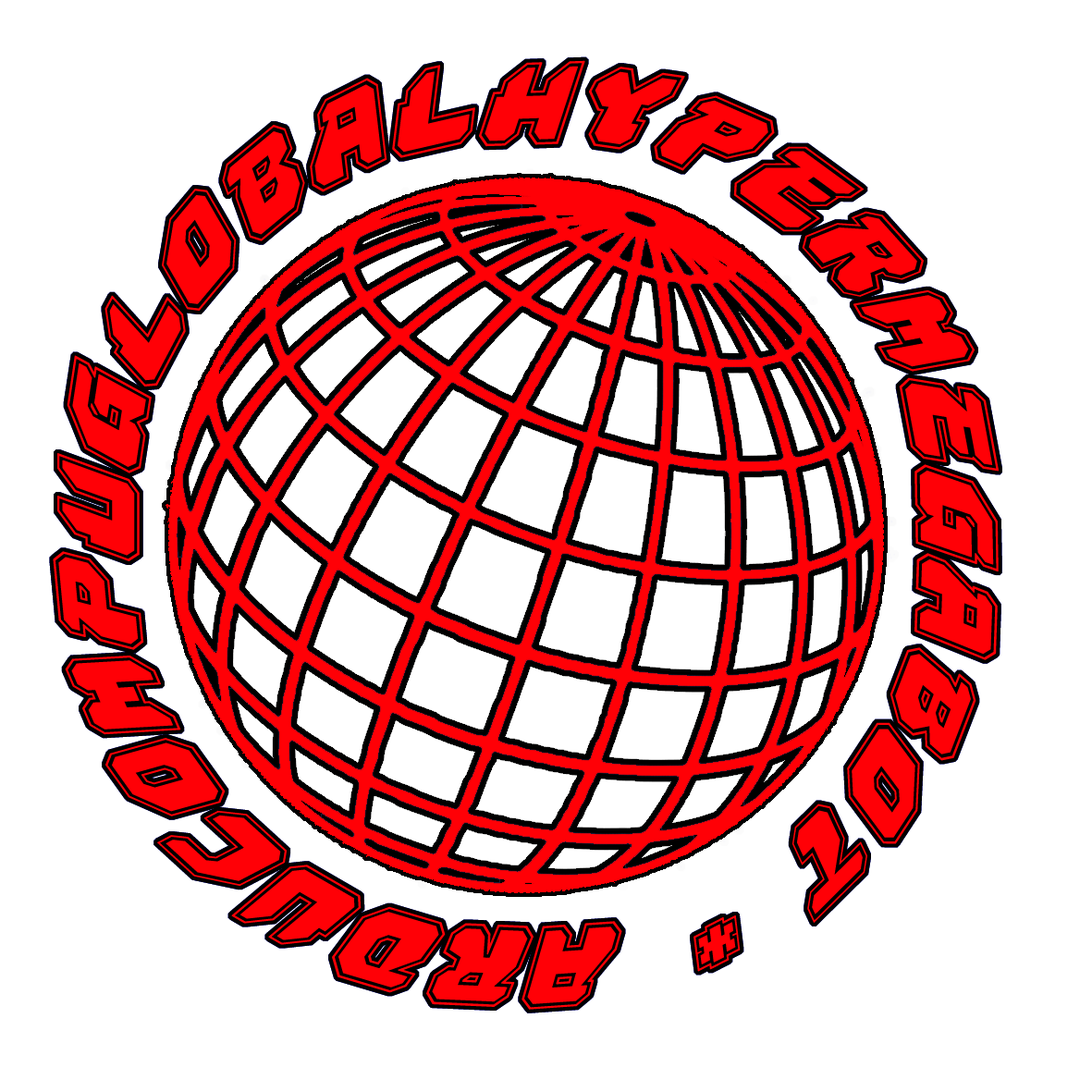
<style>
.page{position:relative;width:1092px;height:1092px;background:#ffffff}
.page>*{position:absolute;margin:0}
.t1{font:115.6px "AstropolisAcademyItalic";color:#ff0006;font-weight:bold}
</style>
<div class="page">
<p class="t1" style="left:53px;top:60px;width:946px;height:950px;text-align:center">arducompuglobalhypermegabot *</p>
</div>
